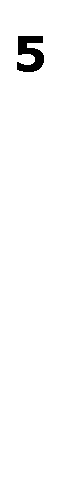
<style>
.page{position:relative;width:64px;height:500px;background:#ffffff}
.page>*{position:absolute;margin:0}
.t1{font:48px "Verdana-Bold";color:#000000}
</style>
<div class="page">
<p class="t1" style="left:17px;top:36px;width:27px;height:36px">5</p>
</div>
